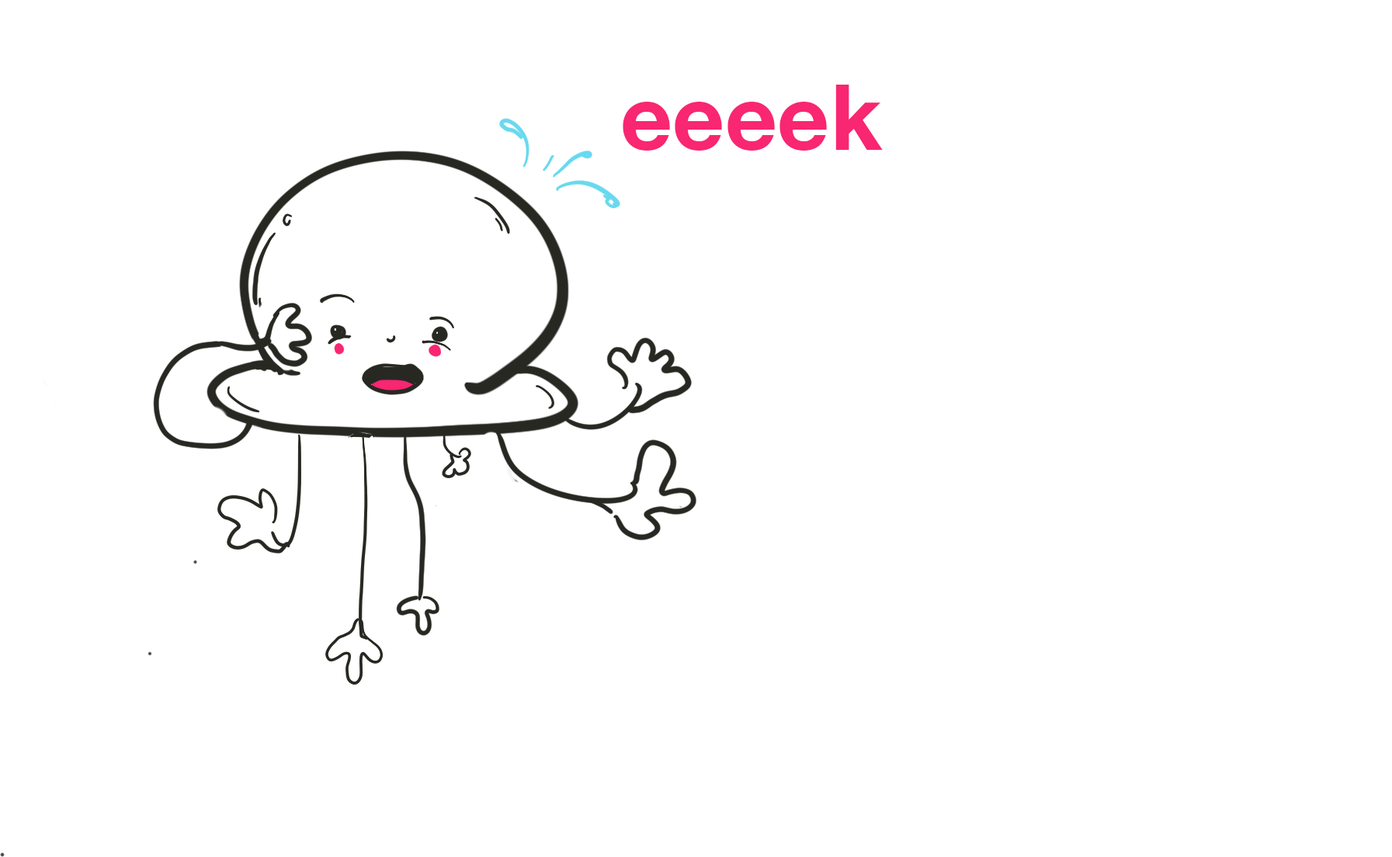
<style>
.page{position:relative;width:1392px;height:857px;background:#ffffff}
.page>*{position:absolute;margin:0}
.t1{font:91.1px "HelveticaNeue-Bold";color:#f92672}
</style>
<div class="page">
<p class="t1" style="left:622px;top:85px;width:260px;height:66px">eeeek</p>
</div>
